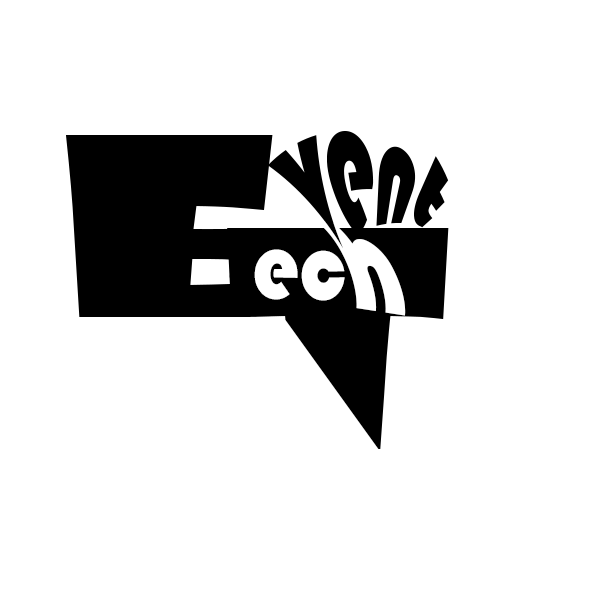
<style>
.page{position:relative;width:600px;height:600px;background:#ffffff}
.page>*{position:absolute;margin:0}
.t1{font:243.1px "ShowcardGothic-Reg";color:#000000;scale:1.65 1}
.t2{font:101.9px "Bauhaus93";color:#000000;scale:0.76 1}
.t3{font:87.6px "Bauhaus93";color:#000000;scale:0.74 1}
.t4{font:87.6px "Bauhaus93";color:#ffffff;scale:0.74 1}
.t5{font:295.5px "ShowcardGothic-Reg";color:#000000;scale:1.23 1}
.t6{font:98.3px "Bauhaus93";color:#ffffff;scale:0.86 1}
</style>
<div class="page">
<p class="t1" style="left:66px;top:135px;width:207px;height:182px">e</p>
<p class="t2" style="left:267px;top:131px;width:182px;height:118px;rotate:7deg">vent</p>
<p class="t3" style="left:229px;top:219px;width:177px;height:97px">ec<span class="t4">h</span></p>
<p class="t5" style="left:227px;top:228px;width:222px;height:221px">t</p>
<p class="t6" style="left:254px;top:249px;width:91px;height:52px;rotate:1deg">ec</p>
</div>
